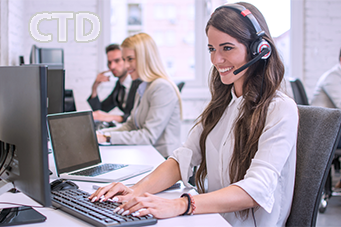
<style>
.page{position:relative;width:341px;height:227px}
.page>*{position:absolute;margin:0}
.t1{font:39.6px "MyriadPro-Bold";letter-spacing:-0.04em;color:#ded8ee;font-weight:bold}
</style>
<div class="page">
<p class="t1" style="left:30px;top:13px;width:70px;height:28px">CTD</p>
</div>
